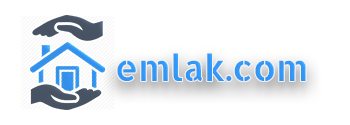
<style>
.page{position:relative;width:350px;height:125px;background:#ffffff}
.page>*{position:absolute;margin:0}
.t1{font:36px "AllertaStencil-Regular";color:#3397f5}
</style>
<div class="page">
<p class="t1" style="left:117px;top:53px;width:189px;height:28px">emlak.com</p>
</div>
